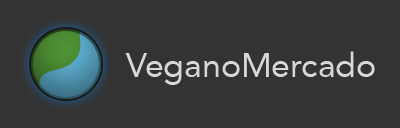
<style>
.page{position:relative;width:400px;height:128px;background:#333333}
.page>*{position:absolute;margin:0}
.t1{font:34px "Avenir-Roman";color:#d7d7d7}
</style>
<div class="page">
<p class="t1" style="left:125px;top:51px;width:250px;height:34px">VeganoMercado</p>
</div>
